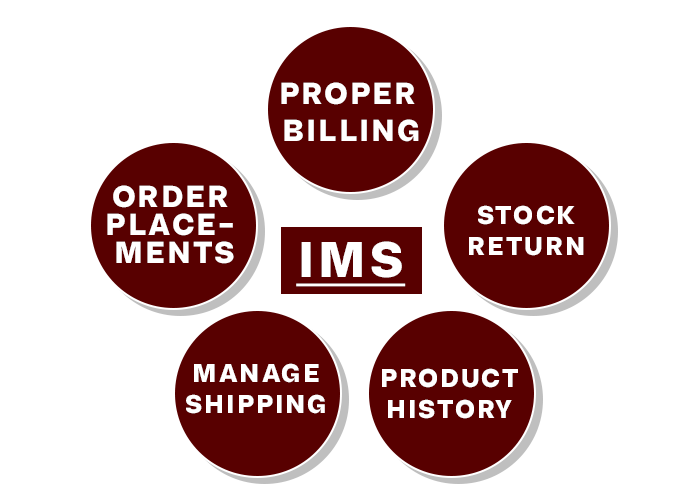
<style>
.page{position:relative;width:700px;height:503px;background:#ffffff}
.page>*{position:absolute;margin:0}
.t1{font:30.5px "AnotherGroteskW05-TextBold";color:#ffffff}
.t2{font:30.5px/28.1px "AnotherGroteskW05-TextBold";color:#ffffff}
.t3{font:25.9px "AnotherGroteskW05-TextBold";color:#ffffff}
.t4{font:50.5px "AnotherGroteskW05-TextBold";color:#ffffff;text-decoration:underline}
</style>
<div class="page">
<p class="t1" style="left:281px;top:82px;width:138px;height:60px;text-align:center">PROPER <br>BILLING</p>
<p class="t2" style="left:107px;top:185px;width:127px;height:79px;text-align:center">ORDER <br>PLACE- <br>MENTS</p>
<p class="t3" style="left:469px;top:205px;width:115px;height:51px;text-align:center">STOCK<br>RETURN</p>
<p class="t4" style="left:296px;top:241px;width:110px;height:46px">IMS</p>
<p class="t3" style="left:186px;top:363px;width:139px;height:51px;text-align:center">MANAGE<br>SHIPPING</p>
<p class="t3" style="left:382px;top:368px;width:136px;height:51px;text-align:center">PRODUCT<br>HISTORY</p>
</div>
